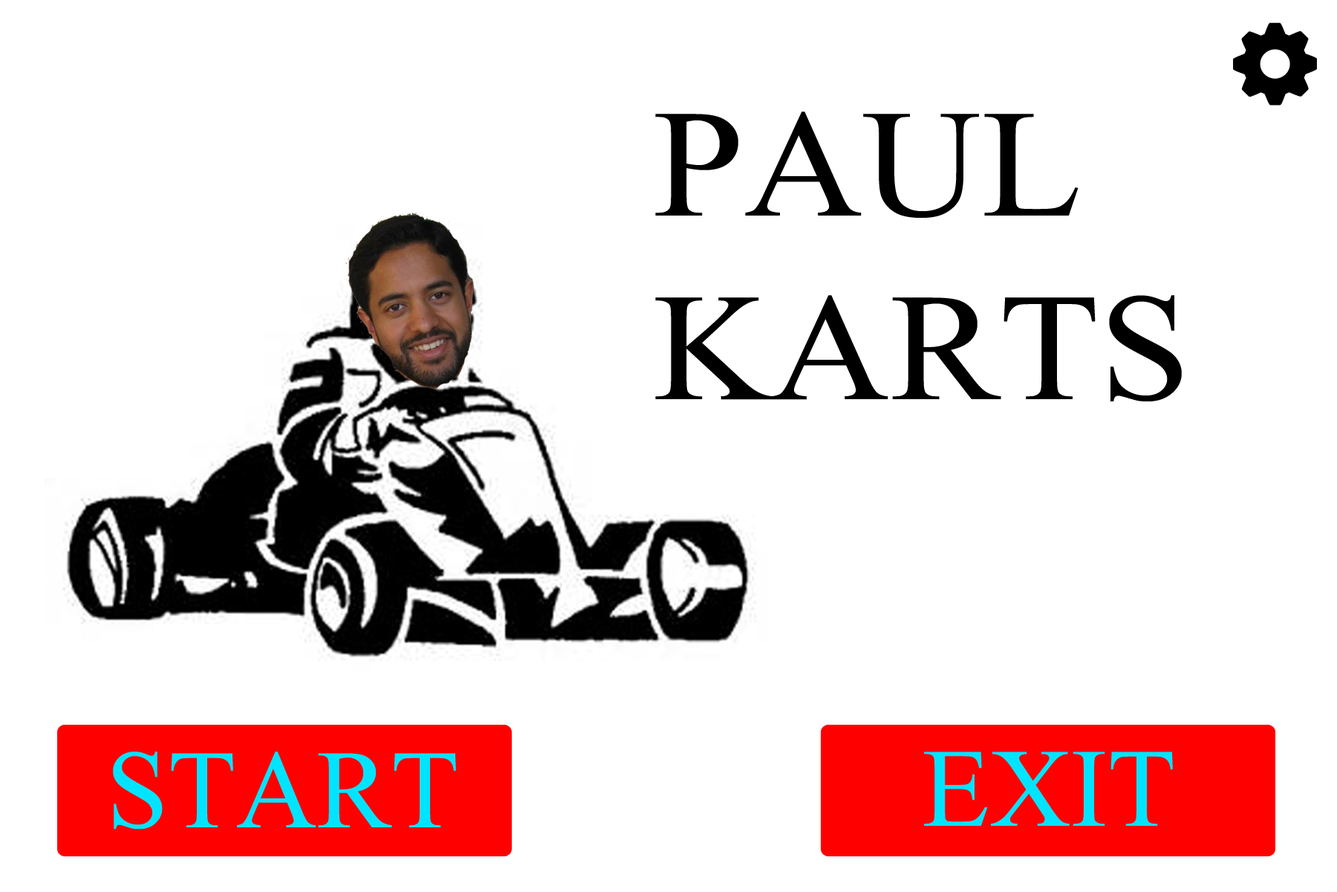
<style>
.page{position:relative;width:1337px;height:892px;background:#ffffff}
.page>*{position:absolute;margin:0}
.t1{font:153.2px "TimesNewRomanPSMT";color:#000000;scale:1.07 1}
.t2{font:111.5px "TimesNewRomanPSMT";color:#00e4ff}
</style>
<div class="page">
<p class="t1" style="left:655px;top:111px;width:527px;height:290px">PAUL<br>KARTS</p>
<p class="t2" style="left:113px;top:751px;width:343px;height:78px">START</p>
<p class="t2" style="left:924px;top:751px;width:249px;height:74px">EXIT</p>
</div>
